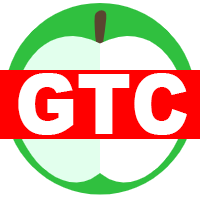
<style>
.page{position:relative;width:200px;height:200px;background:#ffffff}
.page>*{position:absolute;margin:0}
.t1{font:83.9px "Arial-Black";color:#ffffff;scale:0.89 1}
</style>
<div class="page">
<p class="t1" style="left:18px;top:73px;width:169px;height:62px">GTC</p>
</div>
